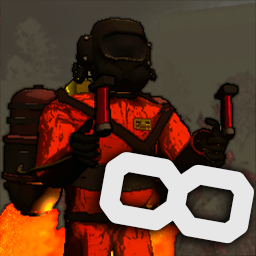
<style>
.page{position:relative;width:256px;height:256px}
.page>*{position:absolute;margin:0}
.t1{font:321.9px "3270-Regular";color:#e7e7e7}
</style>
<div class="page">
<p class="t1" style="left:99px;top:152px;width:155px;height:92px;rotate:10deg">∞</p>
</div>
